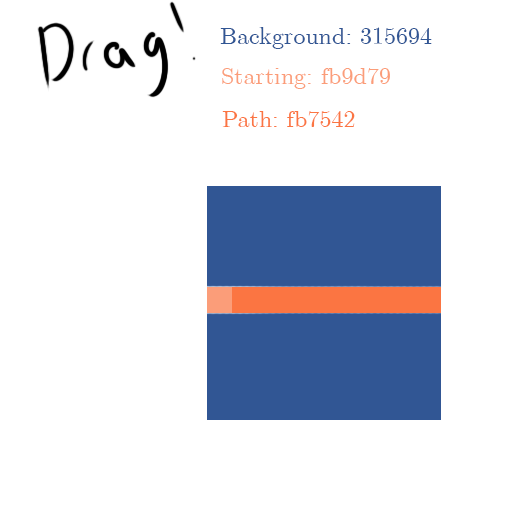
<style>
.page{position:relative;width:512px;height:512px;background:#ffffff}
.page>*{position:absolute;margin:0}
.t1{font:24px "Euclid";color:#315694}
.t2{font:24px "Euclid";color:#fb9d79}
.t3{font:24px "Euclid";color:#fb7542}
</style>
<div class="page">
<p class="t1" style="left:220px;top:27px;width:212px;height:22px">Background: 315694</p>
<p class="t2" style="left:222px;top:68px;width:168px;height:21px">Starting: fb9d79</p>
<p class="t3" style="left:222px;top:111px;width:133px;height:16px">Path: fb7542</p>
</div>
